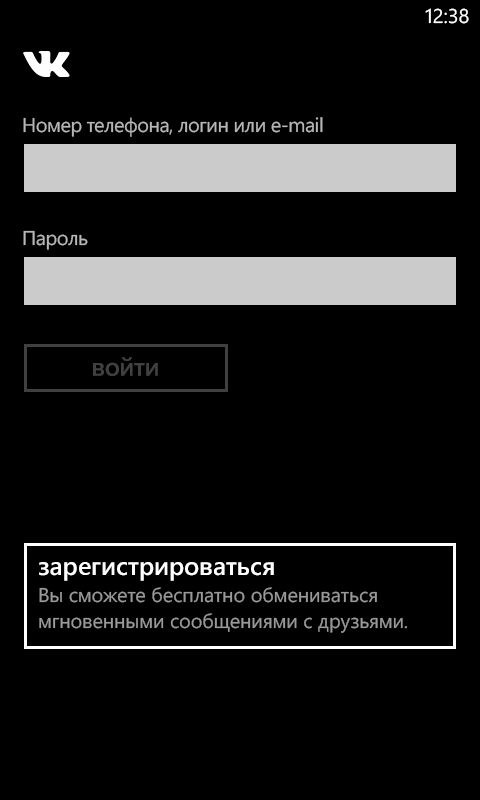
<style>
.page{position:relative;width:480px;height:800px;background:#000000}
.page>*{position:absolute;margin:0}
.t1{font:20px "SegoeWP";color:#ffffff}
.t2{font:20px/26.7px "SegoeWP";color:#999999}
.t3{font:25.3px/30.7px "SegoeWP-Semibold";color:#ffffff}
</style>
<div class="page">
<p class="t1" style="left:425px;top:8px;width:44px;height:16px">12:38</p>
<p class="t2" style="left:39px;top:562px;width:368px;height:71px"><span class="t3">зарегистрироваться<br></span>Вы сможете бесплатно обмениваться<br>мгновенными сообщениями с друзьями.</p>
</div>
